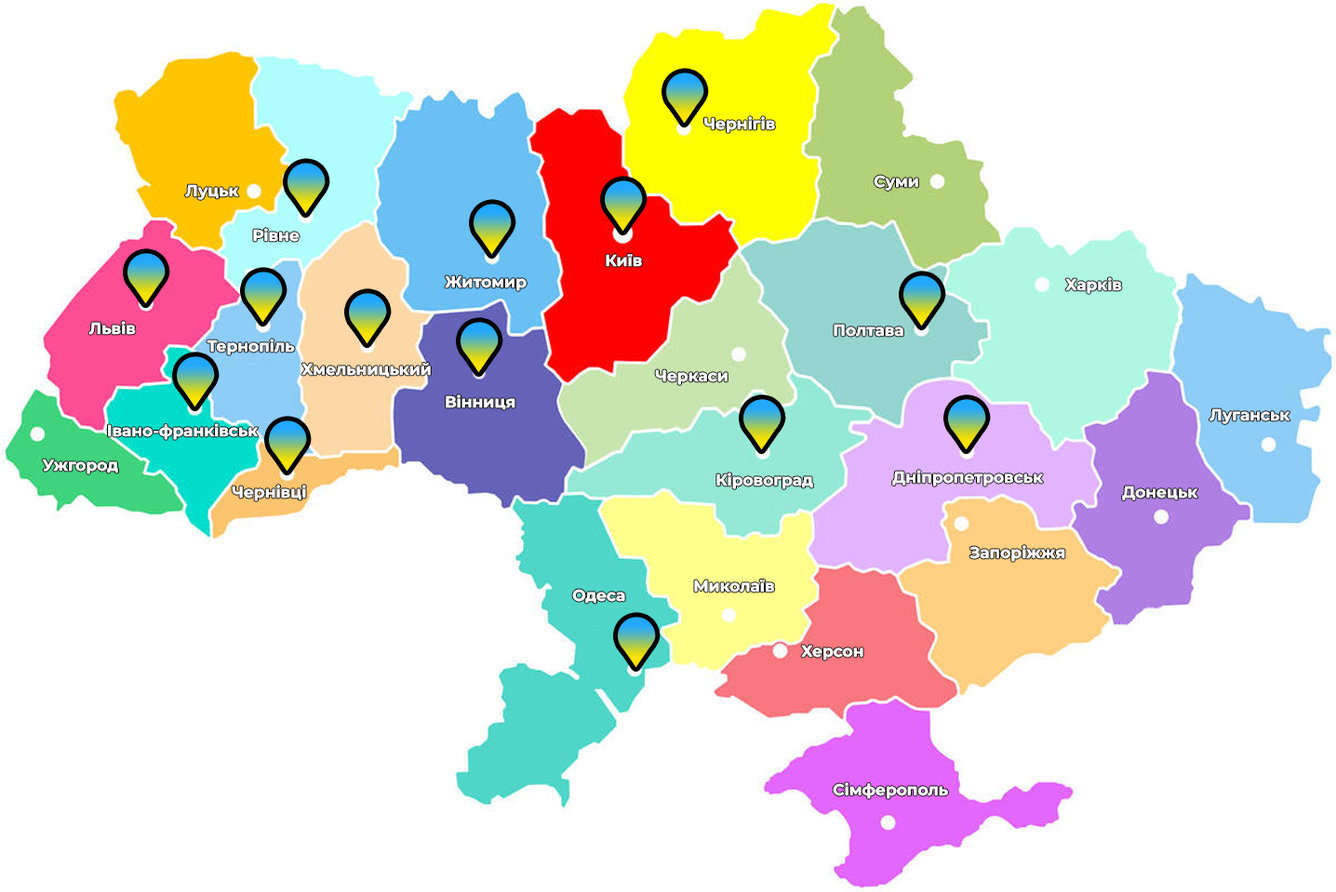
<style>
.page{position:relative;width:1336px;height:892px;background:#ffffff}
.page>*{position:absolute;margin:0}
.t1{font:15.8px "MontserratRoman-Bold";color:#ffffff}
</style>
<div class="page">
<p class="t1" style="left:704px;top:116px;width:71px;height:17px">Чернігів</p>
<p class="t1" style="left:185px;top:184px;width:54px;height:16px">Луцьк</p>
<p class="t1" style="left:874px;top:175px;width:44px;height:16px">Суми</p>
<p class="t1" style="left:253px;top:228px;width:47px;height:14px">Рівне</p>
<p class="t1" style="left:606px;top:254px;width:36px;height:13px">Київ</p>
<p class="t1" style="left:445px;top:275px;width:82px;height:16px">Житомир</p>
<p class="t1" style="left:1065px;top:277px;width:57px;height:17px">Харків</p>
<p class="t1" style="left:88px;top:321px;width:48px;height:14px">Львів</p>
<p class="t1" style="left:834px;top:324px;width:70px;height:13px">Полтава</p>
<p class="t1" style="left:207px;top:339px;width:88px;height:16px">Тернопіль</p>
<p class="t1" style="left:301px;top:363px;width:130px;height:15px">Хмельницький</p>
<p class="t1" style="left:655px;top:369px;width:73px;height:16px">Черкаси</p>
<p class="t1" style="left:446px;top:395px;width:70px;height:15px">Вінниця</p>
<p class="t1" style="left:1210px;top:409px;width:81px;height:15px">Луганськ</p>
<p class="t1" style="left:108px;top:423px;width:151px;height:17px">Івано-франківська</p>
<p class="t1" style="left:42px;top:459px;width:76px;height:16px">Ужгород</p>
<p class="t1" style="left:717px;top:473px;width:96px;height:16px">Кіровоград</p>
<p class="t1" style="left:892px;top:470px;width:152px;height:17px">Дніпропетровськ</p>
<p class="t1" style="left:232px;top:485px;width:74px;height:17px">Чернівці</p>
<p class="t1" style="left:1122px;top:486px;width:77px;height:15px">Донецьк</p>
<p class="t1" style="left:970px;top:545px;width:95px;height:17px">Запоріжжя</p>
<p class="t1" style="left:694px;top:580px;width:81px;height:13px">Миколаїв</p>
<p class="t1" style="left:572px;top:589px;width:53px;height:15px">Одеса</p>
<p class="t1" style="left:801px;top:645px;width:63px;height:16px">Херсон</p>
<p class="t1" style="left:833px;top:783px;width:115px;height:16px">Сімферополь</p>
</div>
